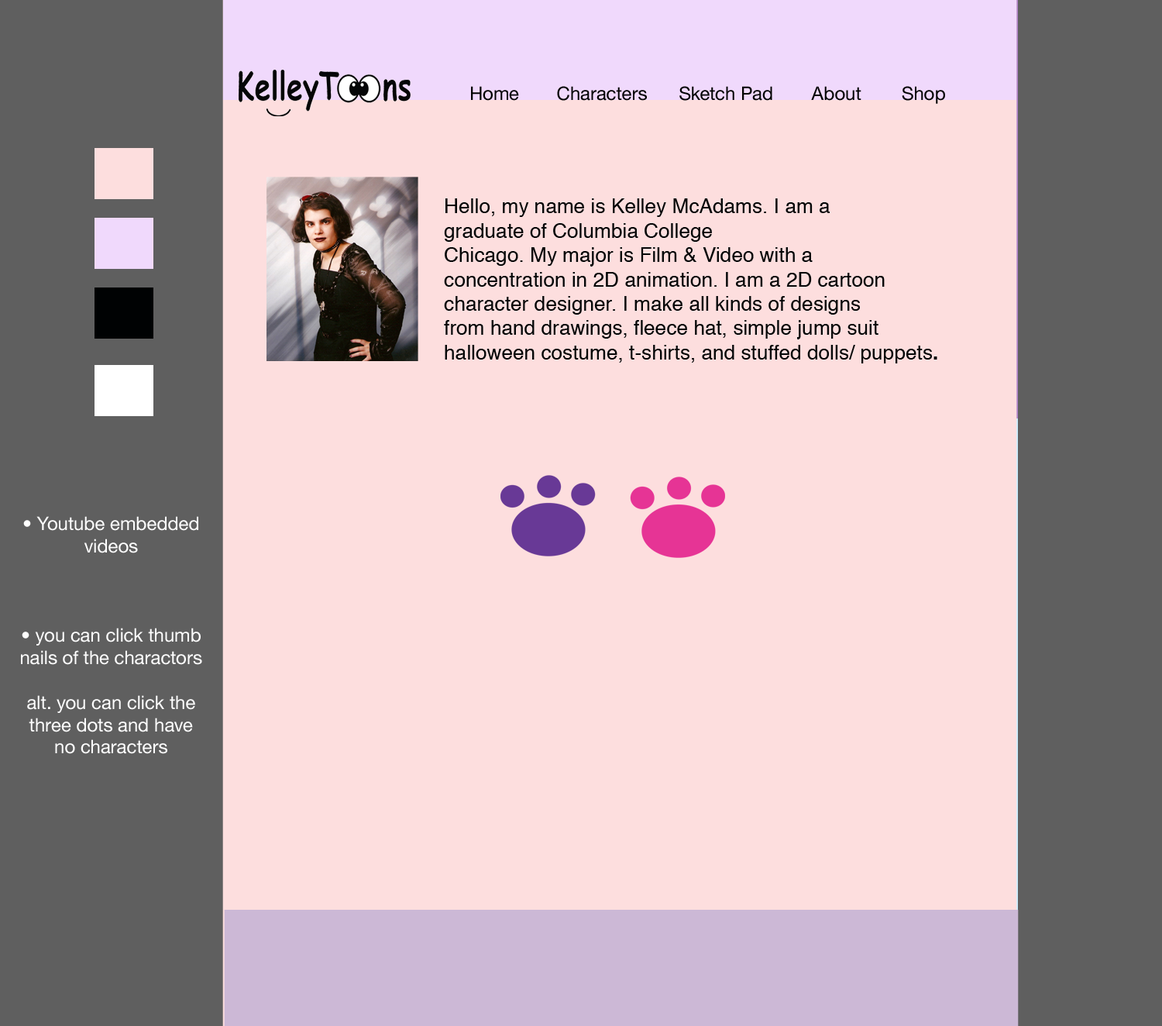
<style>
.page{position:relative;width:1162px;height:1026px;background:#fddede}
.page>*{position:absolute;margin:0}
.t1{font:18.6px "HelveticaNeue";color:#000000}
.t2{font:20.3px "Helvetica";color:#040607}
.t3{font:20.3px "Helvetica-Bold";color:#040607}
.t4{font:18.6px "HelveticaNeue";color:#ffffff}
</style>
<div class="page">
<p class="t1" style="left:471px;top:86px;width:48px;height:15px">Home</p>
<p class="t1" style="left:557px;top:86px;width:90px;height:15px">Characters</p>
<p class="t1" style="left:680px;top:86px;width:93px;height:15px">Sketch Pad</p>
<p class="t1" style="left:811px;top:86px;width:51px;height:15px">About</p>
<p class="t1" style="left:902px;top:86px;width:43px;height:18px">Shop</p>
<p class="t2" style="left:444px;top:198px;width:494px;height:165px">Hello, my name is Kelley McAdams. I am a <br>graduate of Columbia College<br>Chicago. My major is Film &amp; Video with a<br>concentration in 2D animation. I am a 2D cartoon <br>character designer. I make all kinds of designs<br>from hand drawings, fleece hat, simple jump suit<br>halloween costume, t-shirts, and stuffed dolls/ puppets<span class="t3">.</span></p>
<p class="t4" style="left:21px;top:516px;width:181px;height:238px;text-align:center">• Youtube embedded videos<br><br><br><br>• you can click thumb nails of the charactors <br><br>alt. you can click the three dots and have no characters</p>
</div>
